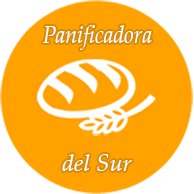
<style>
.page{position:relative;width:194px;height:194px;background:#ffa200}
.page>*{position:absolute;margin:0}
.t1{font:25.2px "PalatinoLinotype-Italic";color:#ffffff;scale:0.87 1}
.t2{font:24px "PalatinoLinotype-Italic";color:#ffffff}
</style>
<div class="page">
<p class="t1" style="left:43px;top:25px;width:109px;height:25px">Panificadora</p>
<p class="t2" style="left:62px;top:154px;width:70px;height:17px">del Sur</p>
</div>
